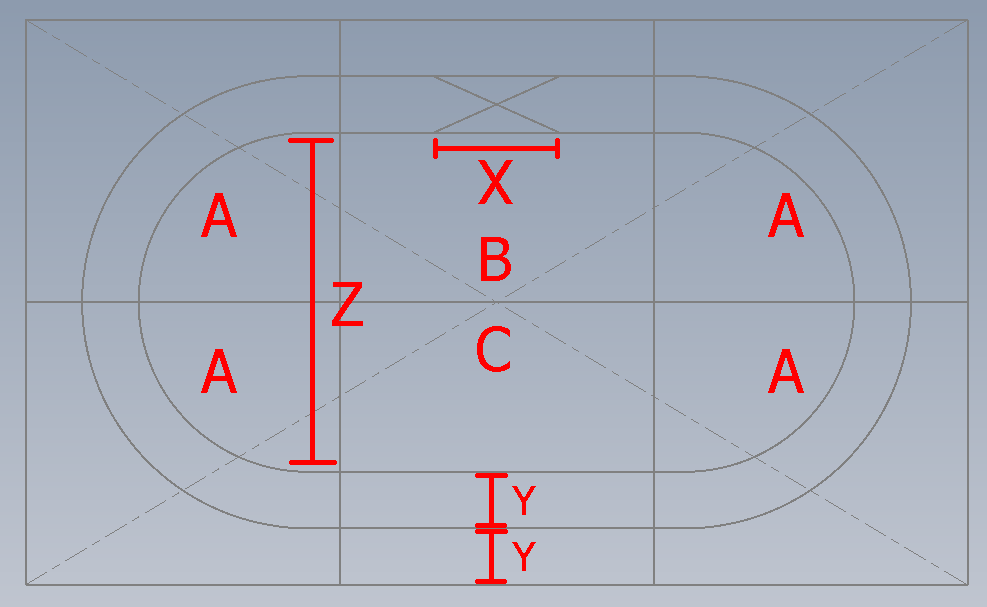
<style>
.page{position:relative;width:987px;height:607px}
.page>*{position:absolute;margin:0}
.t1{font:60px "Tahoma";color:#ff0000}
.t2{font:40px "Tahoma";color:#ff0000}
</style>
<div class="page">
<p class="t1" style="left:478px;top:160px;width:35px;height:44px">X</p>
<p class="t1" style="left:201px;top:193px;width:36px;height:44px">A</p>
<p class="t1" style="left:768px;top:193px;width:36px;height:44px">A</p>
<p class="t1" style="left:481px;top:237px;width:30px;height:44px">B</p>
<p class="t1" style="left:332px;top:282px;width:31px;height:44px">Z</p>
<p class="t1" style="left:477px;top:326px;width:33px;height:46px">C</p>
<p class="t1" style="left:201px;top:349px;width:36px;height:44px">A</p>
<p class="t1" style="left:768px;top:349px;width:36px;height:44px">A</p>
<p class="t2" style="left:512px;top:486px;width:24px;height:29px">Y</p>
<p class="t2" style="left:512px;top:542px;width:24px;height:29px">Y</p>
</div>
